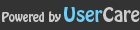
<style>
.page{position:relative;width:140px;height:30px;background:#333333}
.page>*{position:absolute;margin:0}
.t1{font:11px "HoboStd";color:#cccccc}
.t2{font:10px "HoboStd";color:#000000}
.t3{font:12px "HoboStd";color:#cccccc}
.t4{font:18px "HoboStd";color:#6dcff6}
.t5{font:18px "HoboStd";color:#cccccc}
</style>
<div class="page">
<p class="t1" style="left:2px;top:7px;width:138px;height:15px"><span class="t2"> </span>Powered<span class="t3"> by </span><span class="t4">User</span><span class="t5">Care</span></p>
</div>
